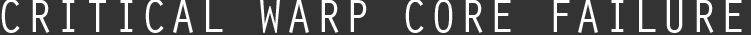
<style>
.page{position:relative;width:751px;height:35px;background:#333333}
.page>*{position:absolute;margin:0}
.t1{font:48.3px "OratorStd";color:#ffffff}
</style>
<div class="page">
<p class="t1" style="left:1px;top:0px;width:741px;height:33px">CRITICAL WARP CORE FAILURE</p>
</div>
